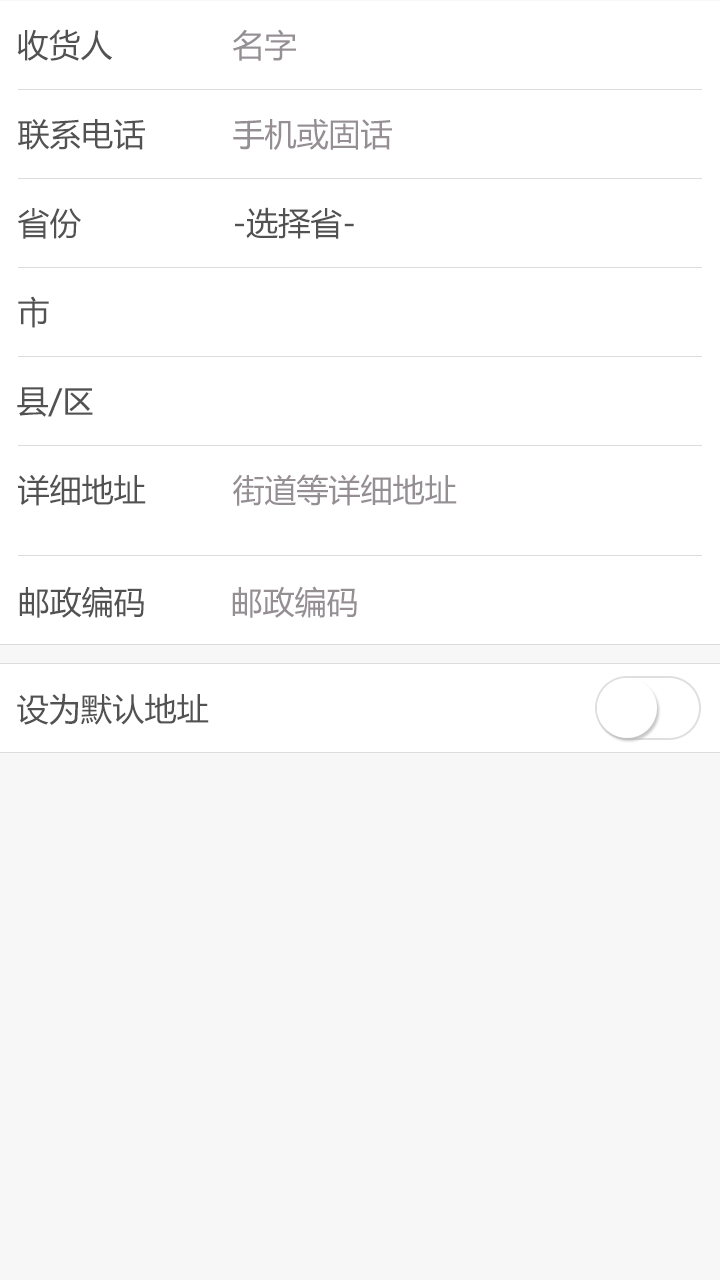
<style>
.page{position:relative;width:720px;height:1280px;background:#ffffff}
.page>*{position:absolute;margin:0}
.t1{font:32px "MicrosoftYaHei";color:#525252}
.t2{font:32px "MicrosoftYaHei";color:#958f93}
</style>
<div class="page">
<p class="t1" style="left:17px;top:29px;width:96px;height:32px">收货人</p>
<p class="t2" style="left:232px;top:29px;width:64px;height:32px">名字</p>
<p class="t1" style="left:18px;top:119px;width:127px;height:31px">联系电话</p>
<p class="t2" style="left:233px;top:119px;width:159px;height:31px">手机或固话</p>
<p class="t1" style="left:18px;top:208px;width:63px;height:31px">省份</p>
<p class="t1" style="left:235px;top:207px;width:119px;height:32px">-选择省-</p>
<p class="t1" style="left:18px;top:296px;width:31px;height:32px">市</p>
<p class="t1" style="left:17px;top:387px;width:76px;height:30px">县/区</p>
<p class="t1" style="left:18px;top:474px;width:128px;height:32px">详细地址</p>
<p class="t2" style="left:233px;top:474px;width:224px;height:32px">街道等详细地址</p>
<p class="t1" style="left:19px;top:586px;width:125px;height:32px">邮政编码</p>
<p class="t2" style="left:232px;top:586px;width:125px;height:32px">邮政编码</p>
<p class="t1" style="left:17px;top:693px;width:192px;height:32px">设为默认地址</p>
</div>
